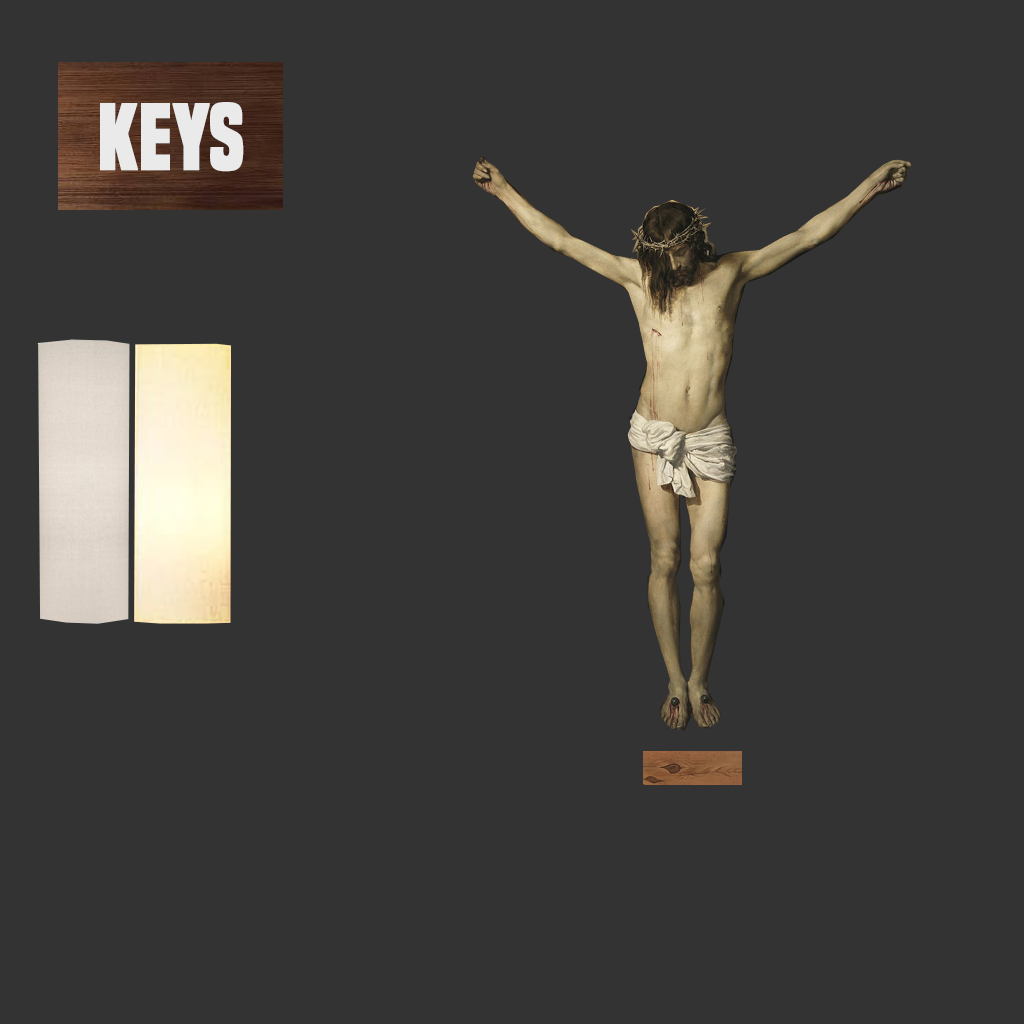
<style>
.page{position:relative;width:1024px;height:1024px;background:#333333}
.page>*{position:absolute;margin:0}
.t1{font:86.9px "BuiltTitlingRg-Bold";color:#eaeaea;font-weight:bold;scale:0.92 1}
</style>
<div class="page">
<p class="t1" style="left:100px;top:102px;width:144px;height:70px">keys</p>
</div>
